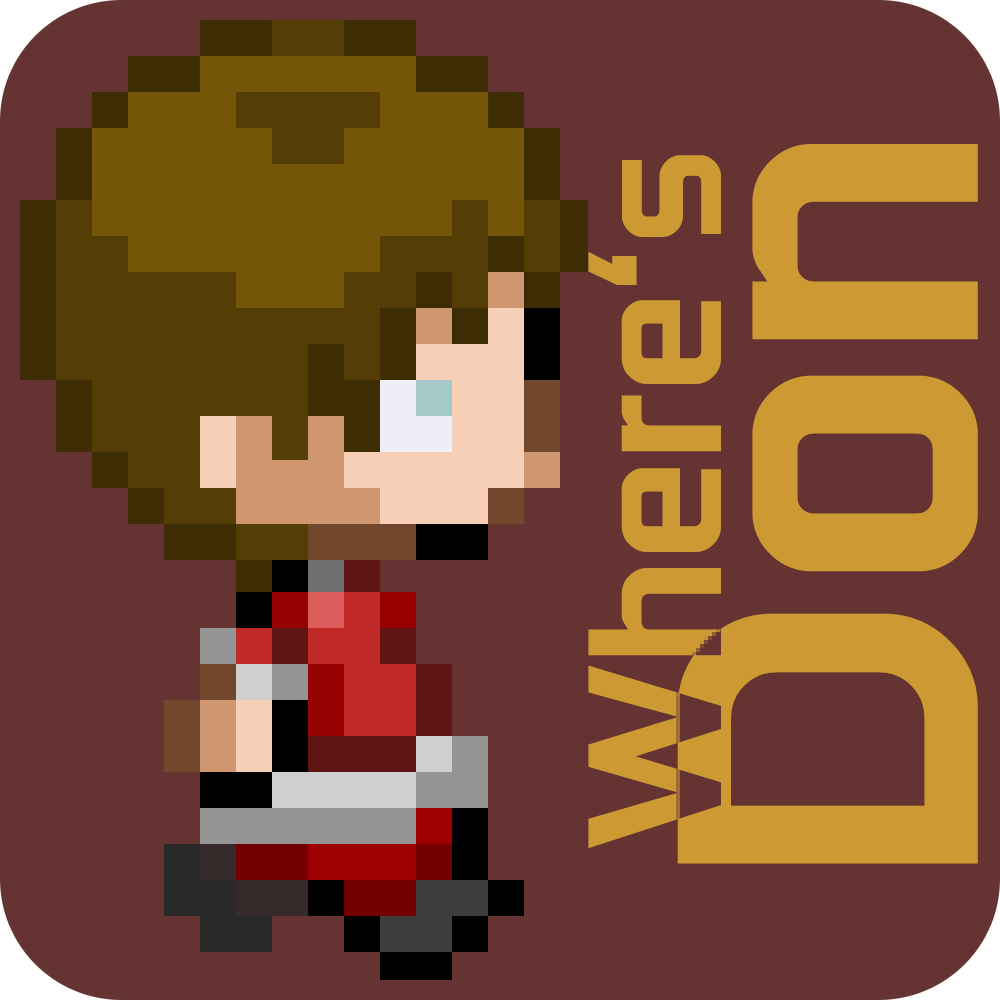
<style>
.page{position:relative;width:1000px;height:1000px;background:#663333}
.page>*{position:absolute;margin:0}
.t1{font:439.8px "GeForce-Bold";color:#cc9933}
.t2{font:193.7px "GeForce-Bold";color:#cc9933}
</style>
<div class="page">
<p class="t1" style="left:677px;top:144px;width:301px;height:720px;rotate:-90deg">Don</p>
<p class="t2" style="left:588px;top:155px;width:133px;height:693px;rotate:-90deg">Where‘s</p>
<p class="t2" style="left:588px;top:155px;width:133px;height:693px;rotate:-90deg">Where‘s</p>
</div>
